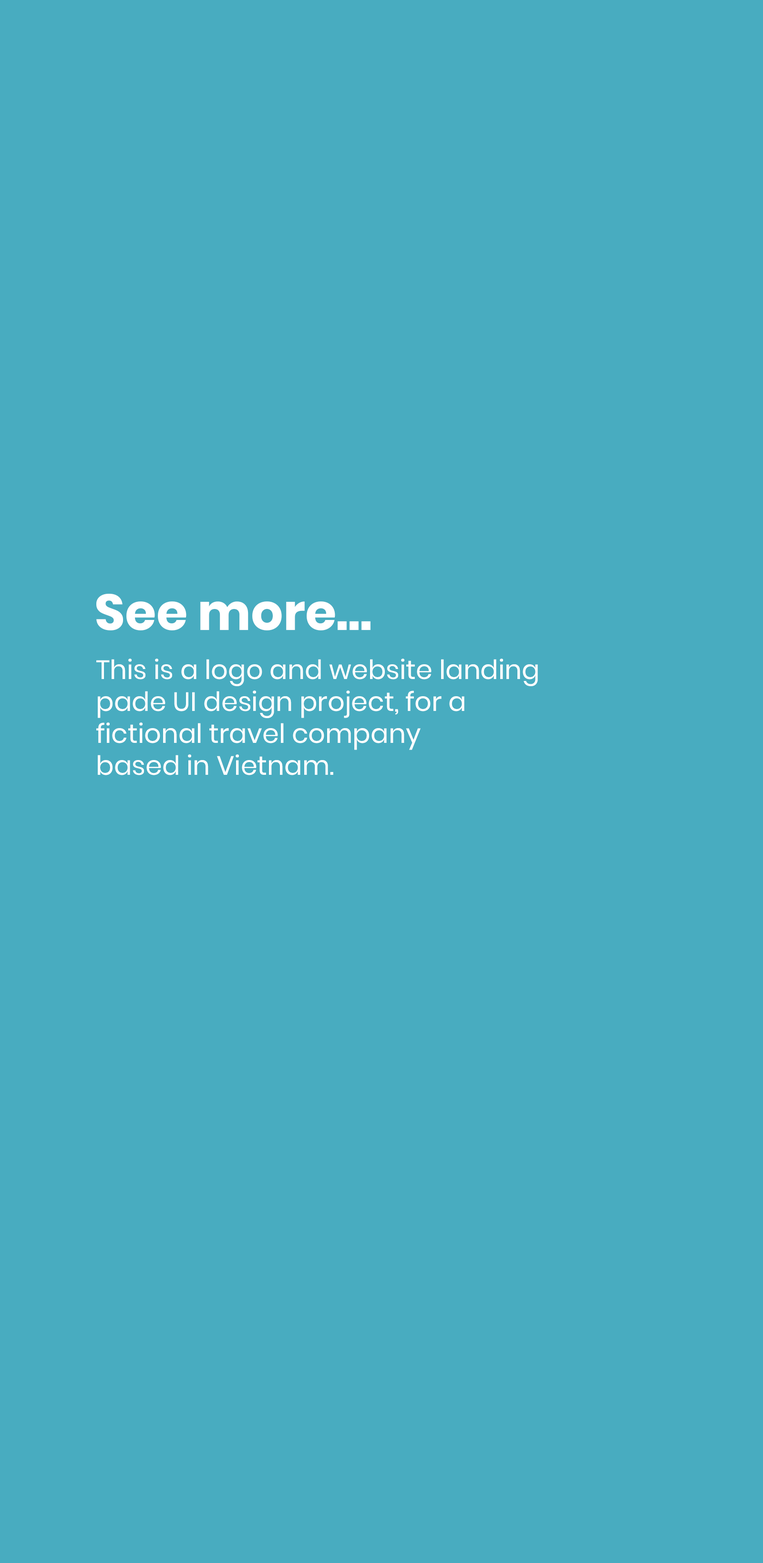
<style>
.page{position:relative;width:763px;height:1563px;background:#48acc0}
.page>*{position:absolute;margin:0}
.t1{font:50.4px "Poppins-Bold";color:#ffffff}
.t2{font:26.6px "Poppins-Regular";color:#ffffff}
</style>
<div class="page">
<p class="t1" style="left:96px;top:594px;width:274px;height:37px">See more...</p>
<p class="t2" style="left:96px;top:659px;width:442px;height:117px">This is a logo and website landing<br>pade UI design project, for a<br>fictional travel company<br>based in Vietnam.</p>
</div>
